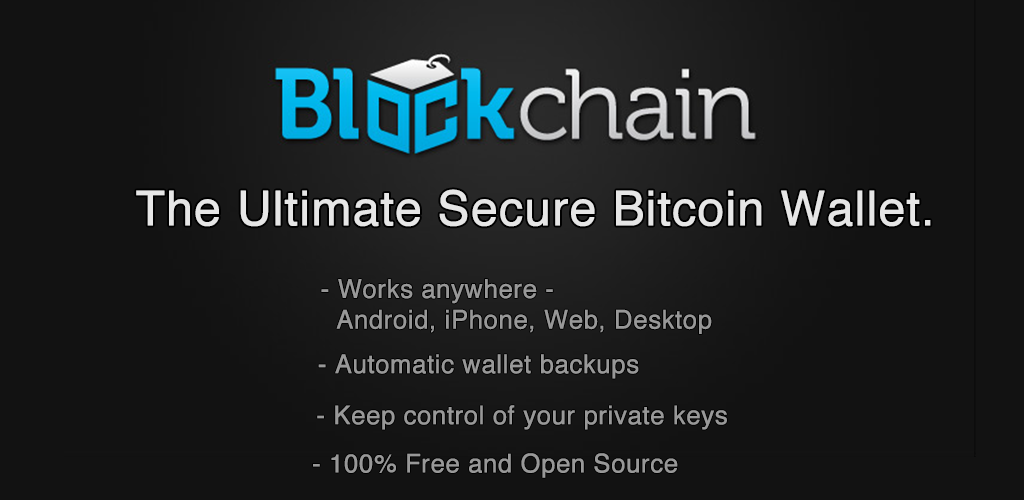
<style>
.page{position:relative;width:1024px;height:500px;background:#121212}
.page>*{position:absolute;margin:0}
.t1{font:48px "Helvetica";color:#e6e6e6;font-weight:bold}
.t2{font:25.5px "Helvetica";color:#989898;font-weight:bold}
</style>
<div class="page">
<p class="t1" style="left:136px;top:189px;width:795px;height:38px">The Ultimate Secure Bitcoin Wallet.</p>
<p class="t2" style="left:321px;top:279px;width:391px;height:55px">- Works anywhere - <br>  Android, iPhone, Web, Desktop</p>
<p class="t2" style="left:318px;top:354px;width:321px;height:25px">- Automatic wallet backups</p>
<p class="t2" style="left:317px;top:405px;width:410px;height:25px">- Keep control of your private keys</p>
<p class="t2" style="left:313px;top:453px;width:365px;height:25px">- 100% Free and Open Source</p>
</div>
